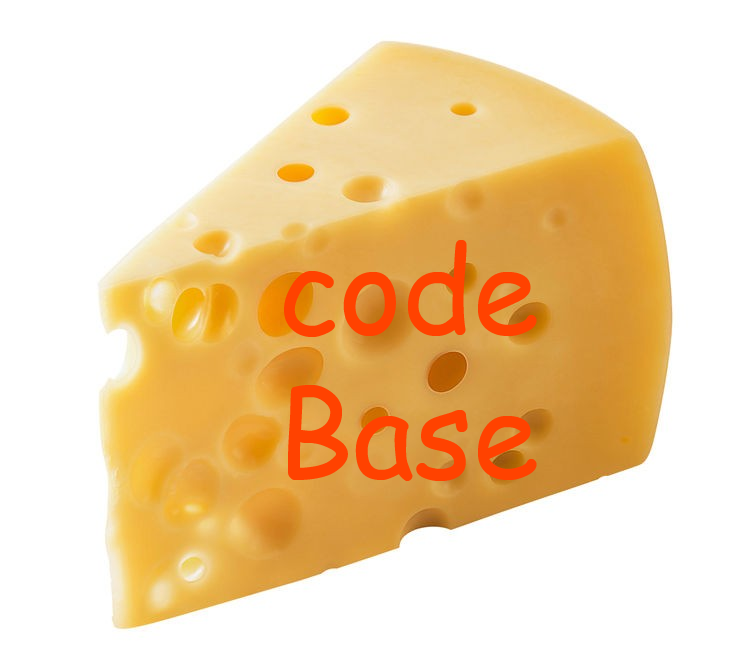
<style>
.page{position:relative;width:732px;height:655px;background:#ffffff}
.page>*{position:absolute;margin:0}
.t1{font:120px "ComicSansMS";color:#ff4200}
</style>
<div class="page">
<p class="t1" style="left:284px;top:240px;width:253px;height:242px;text-align:center">code <br>Base</p>
</div>
